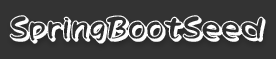
<style>
.page{position:relative;width:276px;height:59px;background:#333333}
.page>*{position:absolute;margin:0}
.t1{font:29.2px "HanWangWCL03";color:#fefefe}
</style>
<div class="page">
<p class="t1" style="left:9px;top:15px;width:257px;height:29px">SpringBootSeed</p>
</div>
